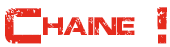
<style>
.page{position:relative;width:170px;height:47px;background:#ffffff}
.page>*{position:absolute;margin:0}
.t1{font:51px "JacintoSans";color:#e52b1d;scale:0.88 1}
.t2{font:50px "JacintoSans";color:#e52b1d;scale:0.88 1}
</style>
<div class="page">
<p class="t1" style="left:2px;top:6px;width:166px;height:38px">Chaine !</p>
<p class="t2" style="left:5px;top:7px;width:162px;height:37px">Chaine !</p>
</div>
